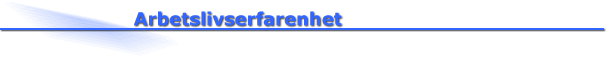
<style>
.page{position:relative;width:606px;height:57px;background:#ffffff}
.page>*{position:absolute;margin:0}
.t1{font:18px "Verdana-Bold";color:#3366ff}
</style>
<div class="page">
<p class="t1" style="left:133px;top:11px;width:209px;height:15px">Arbetslivserfarenhet</p>
</div>
